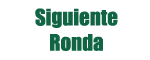
<style>
.page{position:relative;width:150px;height:60px;background:#ffffff}
.page>*{position:absolute;margin:0}
.t1{font:21px "Impact";color:#116544}
</style>
<div class="page">
<p class="t1" style="left:35px;top:8px;width:83px;height:43px;text-align:center">Siguiente<br>Ronda</p>
</div>
